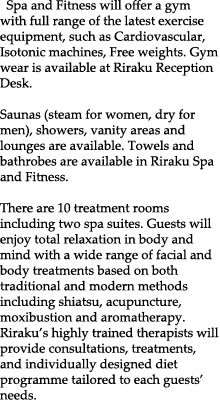
<style>
.page{position:relative;width:220px;height:410px;background:#ffffff}
.page>*{position:absolute;margin:0}
.t1{font:13px "PalatinoLinotype-Roman";color:#000000}
</style>
<div class="page">
<p class="t1" style="left:0px;top:0px;width:219px;height:400px">Spa and Fitness will offer a gym with full range of the latest exercise equipment, such as Cardiovascular, Isotonic machines, Free weights. Gym wear is available at Riraku Reception Desk.<br><br>Saunas (steam for women, dry for men), showers, vanity areas and lounges are available. Towels and bathrobes are available in Riraku Spa and Fitness.<br><br>There are 10 treatment rooms including two spa suites. Guests will enjoy total relaxation in body and mind with a wide range of facial and body treatments based on both traditional and modern methods including shiatsu, acupuncture, moxibustion and aromatherapy. Riraku’s highly trained therapists will provide consultations, treatments, and individually designed diet programme tailored to each guests’ needs.</p>
</div>
